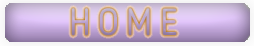
<style>
.page{position:relative;width:254px;height:46px}
.page>*{position:absolute;margin:0}
.t1{font:37.5px "BloggerSans";letter-spacing:0.2em;color:#b9a5cb}
</style>
<div class="page">
<p class="t1" style="left:71px;top:8px;width:106px;height:28px">HOME</p>
</div>
